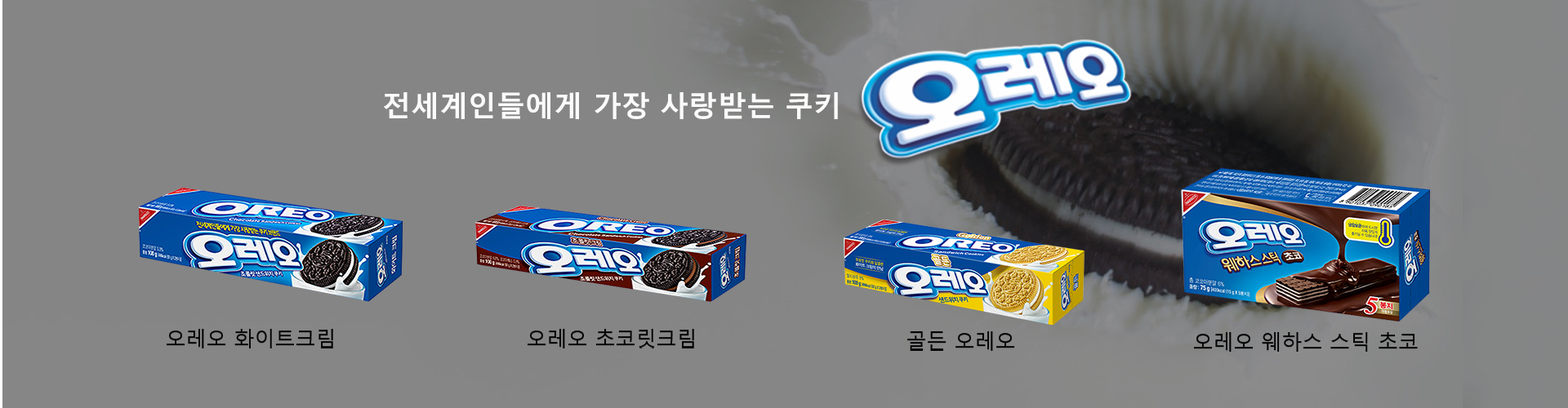
<style>
.page{position:relative;width:1568px;height:408px;background:#858585}
.page>*{position:absolute;margin:0}
.t1{font:28.5px "MalgunGothicBold";color:#fafafa}
.t2{font:20.4px "MalgunGothicRegular";color:#000000}
</style>
<div class="page">
<p class="t1" style="left:384px;top:92px;width:454px;height:27px">전세계인들에게 가장 사랑받는 쿠키</p>
<p class="t2" style="left:167px;top:329px;width:166px;height:20px">오레오 화이트크림</p>
<p class="t2" style="left:528px;top:329px;width:166px;height:20px">오레오 초코릿크림</p>
<p class="t2" style="left:907px;top:332px;width:108px;height:19px">골든 오레오</p>
<p class="t2" style="left:1194px;top:332px;width:224px;height:20px">오레오 웨하스 스틱 초코</p>
</div>
